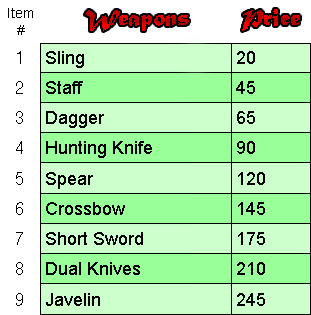
<style>
.page{position:relative;width:311px;height:315px;background:#ccffcc}
.page>*{position:absolute;margin:0}
.t1{font:14px "ArialMT";color:#000000}
.t2{font:24px "MaturaMTScriptCapitals"}
.t3{font:18px "Helvetica-Narrow";color:#000000}
.t4{font:18px "ArialMT";color:#000000}
</style>
<div class="page">
<p class="t1" style="left:8px;top:8px;width:25px;height:27px;text-align:center">Item<br>#</p>
<p class="t2" style="left:85px;top:10px;width:104px;height:21px">Weapons</p>
<p class="t2" style="left:242px;top:9px;width:58px;height:22px">Price</p>
<p class="t3" style="left:17px;top:51px;width:4px;height:13px">1</p>
<p class="t4" style="left:46px;top:51px;width:38px;height:17px">Sling</p>
<p class="t4" style="left:237px;top:51px;width:18px;height:13px">20</p>
<p class="t3" style="left:16px;top:81px;width:7px;height:13px">2</p>
<p class="t4" style="left:46px;top:81px;width:37px;height:13px">Staff</p>
<p class="t4" style="left:236px;top:81px;width:19px;height:13px">45</p>
<p class="t3" style="left:16px;top:111px;width:7px;height:13px">3</p>
<p class="t4" style="left:46px;top:111px;width:58px;height:17px">Dagger</p>
<p class="t4" style="left:237px;top:111px;width:18px;height:13px">65</p>
<p class="t3" style="left:16px;top:141px;width:7px;height:13px">4</p>
<p class="t4" style="left:46px;top:141px;width:106px;height:17px">Hunting Knife</p>
<p class="t4" style="left:237px;top:141px;width:18px;height:13px">90</p>
<p class="t3" style="left:16px;top:172px;width:7px;height:13px">5</p>
<p class="t4" style="left:46px;top:172px;width:47px;height:17px">Spear</p>
<p class="t4" style="left:238px;top:172px;width:27px;height:13px">120</p>
<p class="t3" style="left:16px;top:202px;width:7px;height:13px">6</p>
<p class="t4" style="left:46px;top:202px;width:79px;height:13px">Crossbow</p>
<p class="t4" style="left:238px;top:202px;width:27px;height:13px">145</p>
<p class="t3" style="left:16px;top:232px;width:7px;height:13px">7</p>
<p class="t4" style="left:46px;top:232px;width:97px;height:13px">Short Sword</p>
<p class="t4" style="left:238px;top:232px;width:27px;height:13px">175</p>
<p class="t3" style="left:16px;top:262px;width:7px;height:13px">8</p>
<p class="t4" style="left:46px;top:262px;width:94px;height:13px">Dual Knives</p>
<p class="t4" style="left:237px;top:262px;width:28px;height:13px">210</p>
<p class="t3" style="left:16px;top:293px;width:7px;height:13px">9</p>
<p class="t4" style="left:46px;top:293px;width:54px;height:13px">Javelin</p>
<p class="t4" style="left:237px;top:293px;width:28px;height:13px">245</p>
</div>
